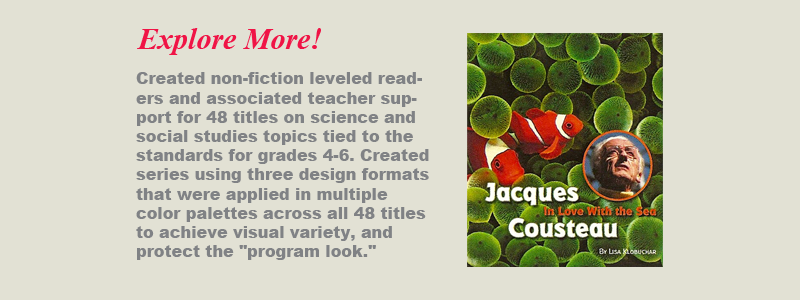
<style>
.page{position:relative;width:800px;height:300px;background:#e2e1d4}
.page>*{position:absolute;margin:0}
.t1{font:30px "TimesNewRomanPS-BoldItalicMT";color:#f01446}
.t2{font:16px "Arial-Black";color:#808285}
</style>
<div class="page">
<p class="t1" style="left:137px;top:28px;width:184px;height:27px">Explore More!</p>
<p class="t2" style="left:136px;top:72px;width:293px;height:188px">Created non-fiction leveled readers and associated teacher support for 48 titles on science and social studies topics tied to the standards for grades 4-6. Created series using three design formats that were applied in multiple <br>color palettes across all 48 titles to achieve visual variety, and <br>protect the "program look."</p>
</div>
